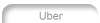
<style>
.page{position:relative;width:100px;height:23px;background:#ffffff}
.page>*{position:absolute;margin:0}
.t1{font:11px "ArialMT";color:#959598}
</style>
<div class="page">
<p class="t1" style="left:39px;top:11px;width:24px;height:9px">Uber</p>
</div>
